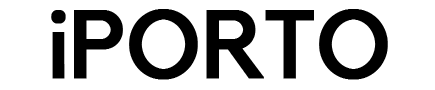
<style>
.page{position:relative;width:435px;height:90px;background:#ffffff}
.page>*{position:absolute;margin:0}
.t1{font:93.8px "Kollektif";color:#010000;font-weight:bold}
</style>
<div class="page">
<p class="t1" style="left:51px;top:9px;width:337px;height:71px">iPORTO</p>
</div>
